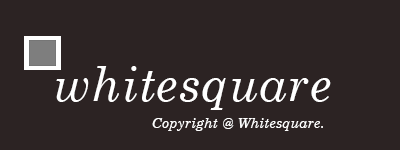
<style>
.page{position:relative;width:400px;height:150px;background:#2c2323}
.page>*{position:absolute;margin:0}
.t1{font:48px "CenturySchoolbook-Italic";letter-spacing:0.02em;color:#ffffff}
.t2{font:14px "CenturySchoolbook-Italic";letter-spacing:0.02em;color:#ffffff}
</style>
<div class="page">
<p class="t1" style="left:56px;top:66px;width:275px;height:44px">whitesquare</p>
<p class="t2" style="left:152px;top:118px;width:171px;height:13px">Copyright @ Whitesquare.</p>
</div>
